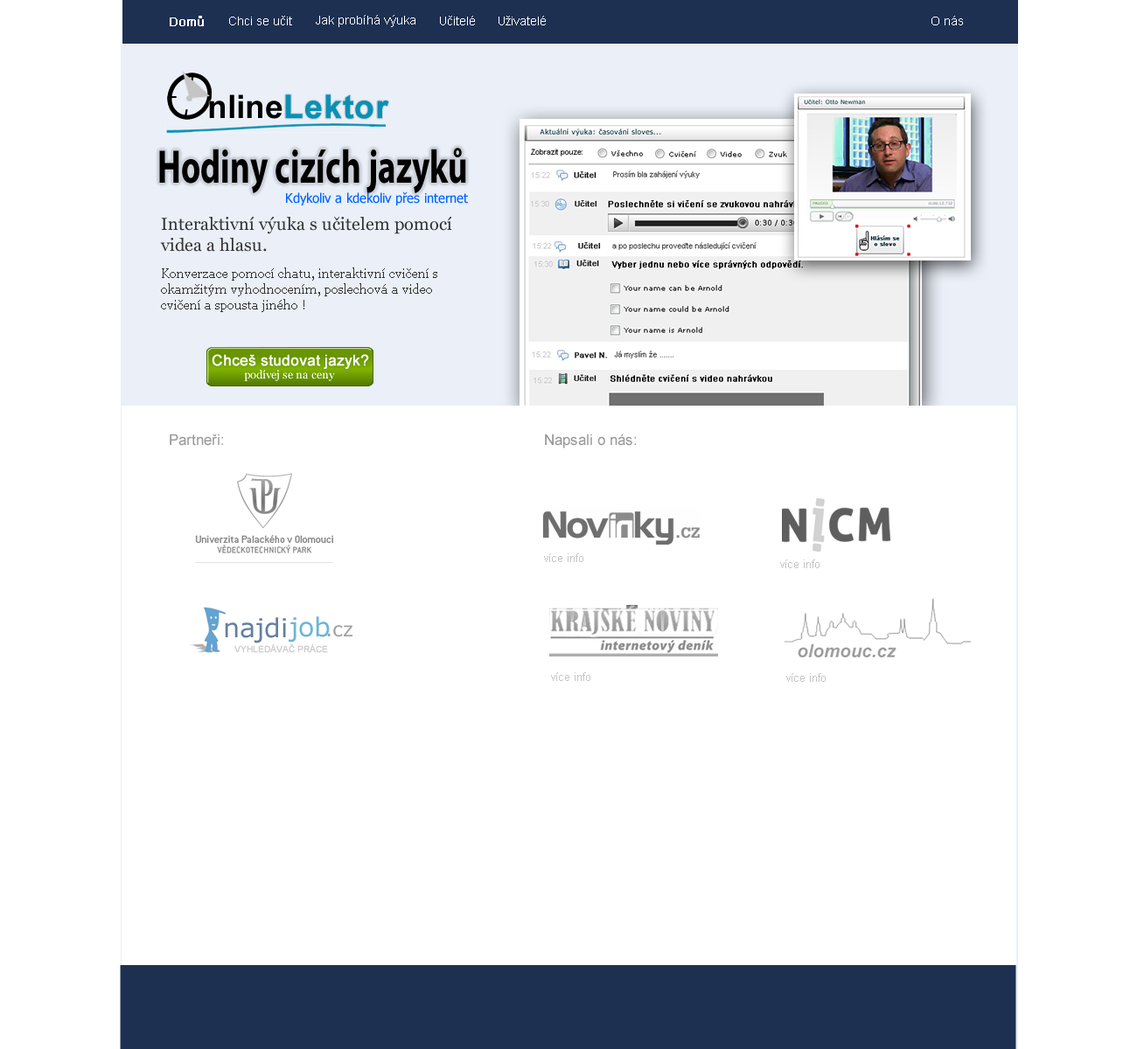
<style>
.page{position:relative;width:1137px;height:1049px;background:#ffffff}
.page>*{position:absolute;margin:0}
.t1{font:12.2px "ArialMT";color:#ffffff;font-weight:bold}
.t2{font:12.2px "ArialMT";color:#ffffff}
.t3{font:32.3px "Arial-BoldMT";color:#000000}
.t4{font:32.3px "Arial-BoldMT";color:#0991b3;font-weight:bold}
.t5{font:47.2px "MyriadPro-Bold";color:#000000;scale:0.72 1}
.t6{font:13.1px "Tahoma";color:#0066ff}
.t7{font:17.5px/21px "Georgia";color:#333333}
.t8{font:13.1px/15.7px "Georgia";color:#333333}
.t9{font:14.9px "ArialMT";color:#999999}
.t10{font:11.4px "ArialMT";color:#c5c5c5}
</style>
<div class="page">
<p class="t1" style="left:170px;top:16px;width:34px;height:10px">Domů</p>
<p class="t2" style="left:229px;top:16px;width:63px;height:9px">Chci se učit</p>
<p class="t2" style="left:316px;top:15px;width:99px;height:12px">Jak probíhá výuka</p>
<p class="t2" style="left:440px;top:16px;width:35px;height:9px">Učitelé</p>
<p class="t2" style="left:498px;top:16px;width:48px;height:9px">Uživatelé</p>
<p class="t2" style="left:931px;top:16px;width:32px;height:9px">O nás</p>
<p class="t3" style="left:209px;top:94px;width:73px;height:25px">nline</p>
<p class="t4" style="left:285px;top:94px;width:104px;height:25px">Lektor</p>
<p class="t5" style="left:159px;top:148px;width:307px;height:45px">Hodiny cizích jazyků</p>
<p class="t6" style="left:286px;top:191px;width:182px;height:14px">Kdykoliv a kdekoliv přes internet</p>
<p class="t7" style="left:160px;top:216px;width:292px;height:36px">Interaktivní výuka s učitelem pomocí<br>videa a hlasu.</p>
<p class="t8" style="left:161px;top:268px;width:276px;height:44px">Konverzace pomocí chatu, interaktivní cvičení s <br>okamžitým vyhodnocením, poslechová a video cvičení a spousta jiného !</p>
<p class="t9" style="left:170px;top:434px;width:53px;height:12px">Partneři:</p>
<p class="t9" style="left:545px;top:434px;width:91px;height:15px">Napsali o nás:</p>
<p class="t10" style="left:544px;top:553px;width:39px;height:9px">více info</p>
<p class="t10" style="left:780px;top:560px;width:39px;height:8px">více info</p>
<p class="t10" style="left:551px;top:672px;width:39px;height:9px">více info</p>
<p class="t10" style="left:786px;top:673px;width:39px;height:9px">více info</p>
</div>
